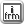
<style>
.page{position:relative;width:24px;height:24px;background:#ffffff}
.page>*{position:absolute;margin:0}
.t1{font:8px "MarkeEigenbauNormal";color:#333333;font-weight:bold}
.t2{font:8px "MarkeEigenbauNormal";color:#333333}
</style>
<div class="page">
<p class="t1" style="left:11px;top:6px;width:2px;height:7px">i</p>
<p class="t2" style="left:5px;top:12px;width:14px;height:7px">frm</p>
</div>
